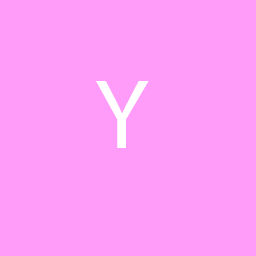
<style>
.page{position:relative;width:256px;height:256px;background:#ff9bf9}
.page>*{position:absolute;margin:0}
.t1{font:100px "MyriadPro-Regular";color:#ffffff}
</style>
<div class="page">
<p class="t1" style="left:96px;top:81px;width:53px;height:67px">Y</p>
</div>
